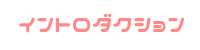
<style>
.page{position:relative;width:200px;height:50px;background:#ffffff}
.page>*{position:absolute;margin:0}
.t1{font:24px "NicoMoji+";color:#ff8888}
</style>
<div class="page">
<p class="t1" style="left:19px;top:13px;width:166px;height:20px">イントロダクション</p>
</div>
